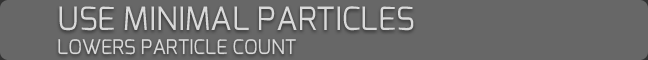
<style>
.page{position:relative;width:648px;height:60px;background:#676767}
.page>*{position:absolute;margin:0}
.t1{font:32px "Exo-Regular";color:#d9d9d9;text-transform:uppercase}
.t2{font:20px "Exo-Regular";color:#d9d9d9;text-transform:uppercase}
</style>
<div class="page">
<p class="t1" style="left:58px;top:6px;width:356px;height:49px">Use minimal particles<br><span class="t2">Lowers particle count</span></p>
</div>
